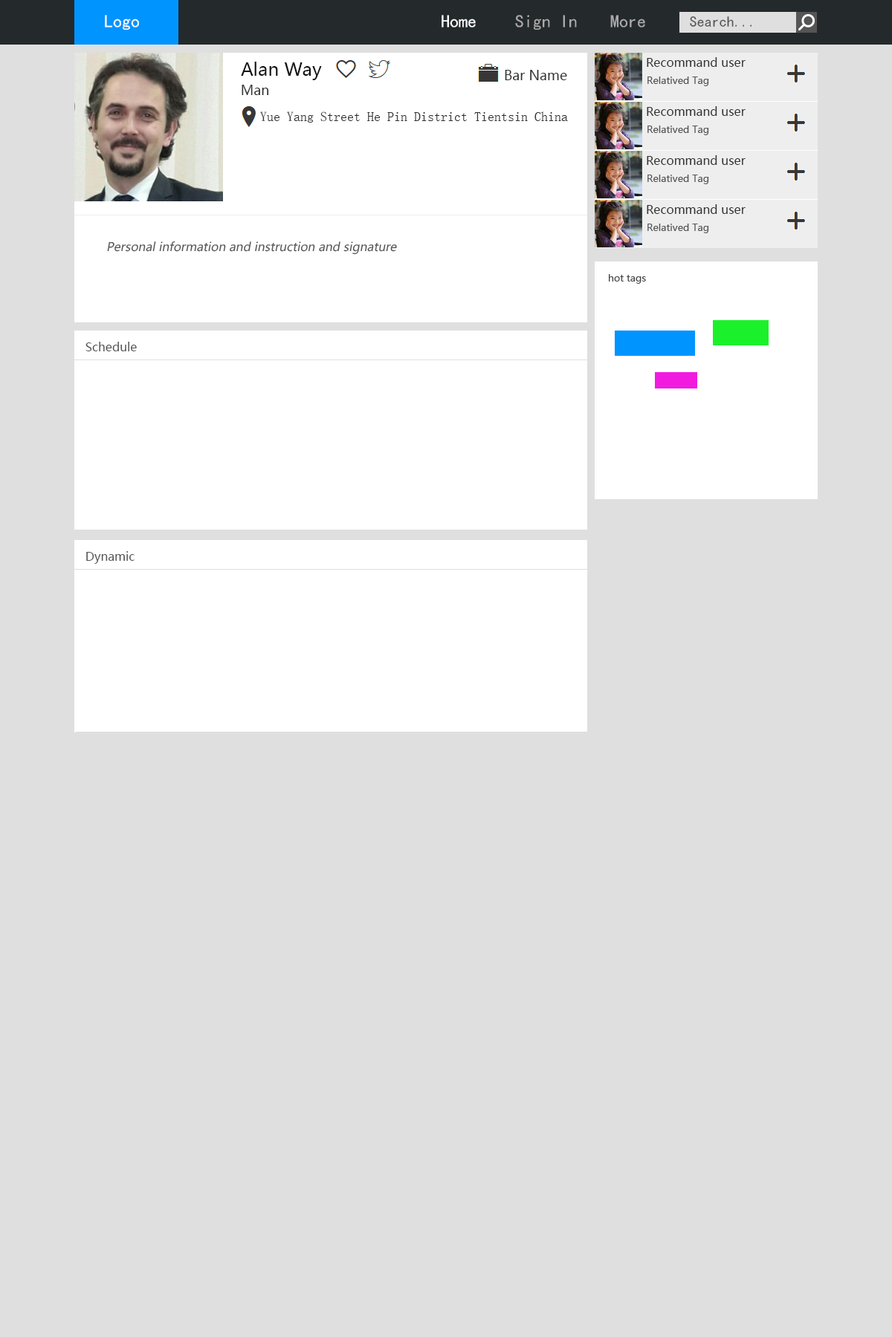
<style>
.page{position:relative;width:892px;height:1337px;background:#dfdfdf}
.page>*{position:absolute;margin:0}
.t1{font:17.8px "¿¬Ìå";color:#ffffff}
.t2{font:17.8px "¿¬Ìå";color:#aaaaaa}
.t3{font:14.9px "¿¬Ìå";color:#555555}
.t4{font:17.8px "MicrosoftYaHei";color:#111111}
.t5{font:11.9px "MicrosoftYaHei";color:#333333}
.t6{font:13.4px "MicrosoftYaHei";color:#333333}
.t7{font:9.7px "MicrosoftYaHei";color:#555555}
.t8{font:13.4px "NSimSun";color:#333333}
.t9{font:11.9px "MicrosoftYaHei";color:#555555;font-style:italic}
.t10{font:9.7px "MicrosoftYaHei";color:#444444}
.t11{font:11.9px "MicrosoftYaHei";color:#555555}
</style>
<div class="page">
<p class="t1" style="left:105px;top:15px;width:34px;height:15px">Logo</p>
<p class="t1" style="left:441px;top:15px;width:35px;height:12px">Home</p>
<p class="t2" style="left:515px;top:15px;width:62px;height:15px">Sign In</p>
<p class="t2" style="left:610px;top:15px;width:35px;height:12px">More</p>
<p class="t3" style="left:690px;top:16px;width:61px;height:11px">Search...</p>
<p class="t4" style="left:241px;top:62px;width:81px;height:18px">Alan Way</p>
<p class="t5" style="left:646px;top:57px;width:99px;height:10px">Recommand user</p>
<p class="t6" style="left:504px;top:70px;width:63px;height:10px">Bar Name</p>
<p class="t7" style="left:647px;top:77px;width:62px;height:9px">Relatived Tag</p>
<p class="t6" style="left:241px;top:85px;width:28px;height:10px">Man</p>
<p class="t8" style="left:260px;top:111px;width:308px;height:12px">Yue Yang Street He Pin District Tientsin China</p>
<p class="t5" style="left:646px;top:106px;width:99px;height:10px">Recommand user</p>
<p class="t7" style="left:647px;top:126px;width:62px;height:9px">Relatived Tag</p>
<p class="t5" style="left:646px;top:155px;width:99px;height:10px">Recommand user</p>
<p class="t7" style="left:647px;top:175px;width:62px;height:9px">Relatived Tag</p>
<p class="t5" style="left:646px;top:204px;width:99px;height:10px">Recommand user</p>
<p class="t7" style="left:647px;top:224px;width:62px;height:9px">Relatived Tag</p>
<p class="t9" style="left:107px;top:241px;width:290px;height:14px">Personal information and instruction and signature</p>
<p class="t10" style="left:609px;top:274px;width:37px;height:10px">hot tags</p>
<p class="t11" style="left:85px;top:342px;width:52px;height:9px">Schedule</p>
<p class="t11" style="left:86px;top:551px;width:48px;height:13px">Dynamic</p>
</div>
